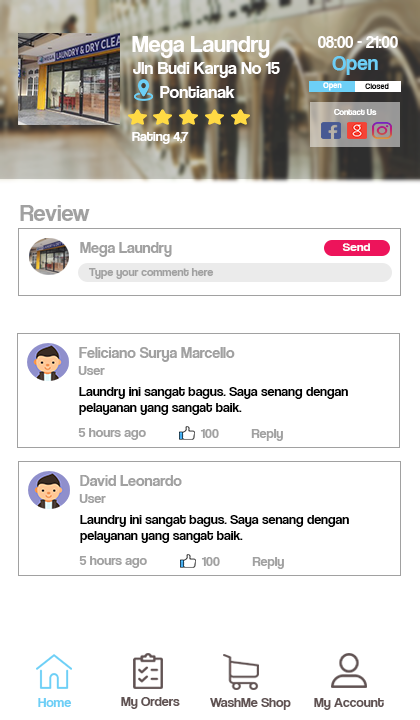
<style>
.page{position:relative;width:420px;height:720px;background:#ffffff}
.page>*{position:absolute;margin:0}
.t1{font:24px "CoolveticaRg-Regular";color:#fffefe}
.t2{font:17px "CoolveticaRg-Regular";color:#fffefe}
.t3{font:18px "CoolveticaRg-Regular";color:#fffefe}
.t4{font:21.3px "CoolveticaRg-Regular";color:#6dcff6}
.t5{font:8.5px "CoolveticaRg-Regular";color:#ffffff}
.t6{font:8.5px "CoolveticaRg-Regular";color:#0a0a0a}
.t7{font:8.1px "CoolveticaRg-Regular";color:#ffffff;scale:1.09 1}
.t8{font:14px "CoolveticaRg-Regular";color:#fffefe}
.t9{font:24px "CoolveticaRg-Regular";color:#a1a1a1}
.t10{font:16px "CoolveticaRg-Regular";color:#a1a1a1}
.t11{font:10.7px "CoolveticaRg-Regular";color:#ffffff;scale:1.25 1}
.t12{font:12px "CoolveticaRg-Regular";color:#a1a1a1}
.t13{font:14px "CoolveticaRg-Regular";color:#a1a1a1}
.t14{font:14px "CoolveticaRg-Regular";color:#000000}
.t15{font:14px "CoolveticaRg-Regular";color:#6dcff6}
.t16{font:14px "CoolveticaRg-Regular";color:#605252}
</style>
<div class="page">
<p class="t1" style="left:132px;top:36px;width:138px;height:22px">Mega Laundry</p>
<p class="t2" style="left:318px;top:36px;width:80px;height:12px">08:00 - 21:00</p>
<p class="t3" style="left:133px;top:62px;width:147px;height:16px">Jln Budi Karya No 15</p>
<p class="t4" style="left:332px;top:56px;width:46px;height:19px">Open</p>
<p class="t3" style="left:160px;top:86px;width:75px;height:12px">Pontianak</p>
<p class="t5" style="left:323px;top:82px;width:19px;height:9px">Open</p>
<p class="t6" style="left:365px;top:83px;width:24px;height:6px">Closed</p>
<p class="t7" style="left:334px;top:109px;width:43px;height:6px">Contact Us</p>
<p class="t8" style="left:132px;top:132px;width:57px;height:12px">Rating 4,7</p>
<p class="t9" style="left:20px;top:205px;width:70px;height:16px">Review</p>
<p class="t10" style="left:80px;top:242px;width:92px;height:15px">Mega Laundry</p>
<p class="t11" style="left:342px;top:243px;width:28px;height:8px">Send</p>
<p class="t12" style="left:88px;top:268px;width:126px;height:11px">Type your comment here</p>
<p class="t10" style="left:79px;top:347px;width:156px;height:15px">Feliciano Surya Marcello</p>
<p class="t13" style="left:78px;top:366px;width:27px;height:9px">User</p>
<p class="t14" style="left:79px;top:387px;width:269px;height:28px">Laundry ini sangat bagus. Saya senang dengan<br>pelayanan yang sangat baik.</p>
<p class="t13" style="left:78px;top:428px;width:68px;height:12px">5 hours ago</p>
<p class="t13" style="left:200px;top:429px;width:19px;height:9px">100</p>
<p class="t13" style="left:251px;top:429px;width:32px;height:12px">Reply</p>
<p class="t10" style="left:80px;top:475px;width:102px;height:11px">David Leonardo</p>
<p class="t13" style="left:79px;top:494px;width:27px;height:9px">User</p>
<p class="t14" style="left:80px;top:515px;width:269px;height:28px">Laundry ini sangat bagus. Saya senang dengan<br>pelayanan yang sangat baik.</p>
<p class="t13" style="left:79px;top:556px;width:68px;height:12px">5 hours ago</p>
<p class="t13" style="left:201px;top:557px;width:19px;height:9px">100</p>
<p class="t13" style="left:252px;top:557px;width:32px;height:12px">Reply</p>
<p class="t15" style="left:38px;top:698px;width:34px;height:9px">Home</p>
<p class="t16" style="left:121px;top:697px;width:59px;height:12px">My Orders</p>
<p class="t16" style="left:210px;top:698px;width:81px;height:12px">WashMe Shop</p>
<p class="t16" style="left:314px;top:698px;width:70px;height:12px">My Account</p>
</div>
